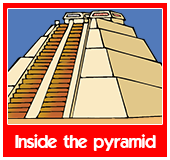
<style>
.page{position:relative;width:170px;height:160px;background:#ff0000}
.page>*{position:absolute;margin:0}
.t1{font:18px "ELEGANCE";color:#ffffff}
</style>
<div class="page">
<p class="t1" style="left:15px;top:134px;width:141px;height:17px">Inside the pyramid</p>
</div>
